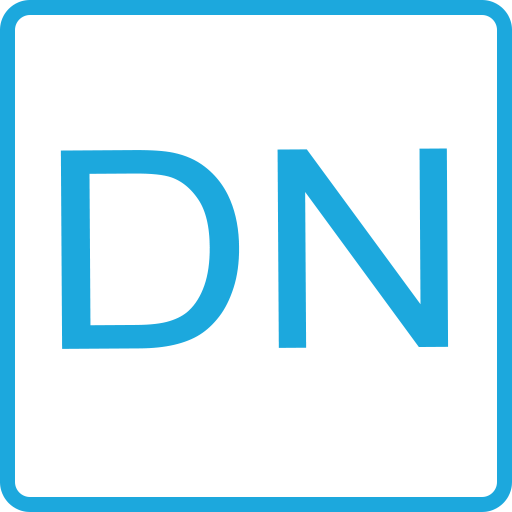
<style>
.page{position:relative;width:512px;height:512px;background:#ffffff}
.page>*{position:absolute;margin:0}
.t1{font:276.9px "ArialMT";color:#1ca8dd;scale:1.08 1}
</style>
<div class="page">
<p class="t1" style="left:60px;top:148px;width:389px;height:201px">DN</p>
</div>
